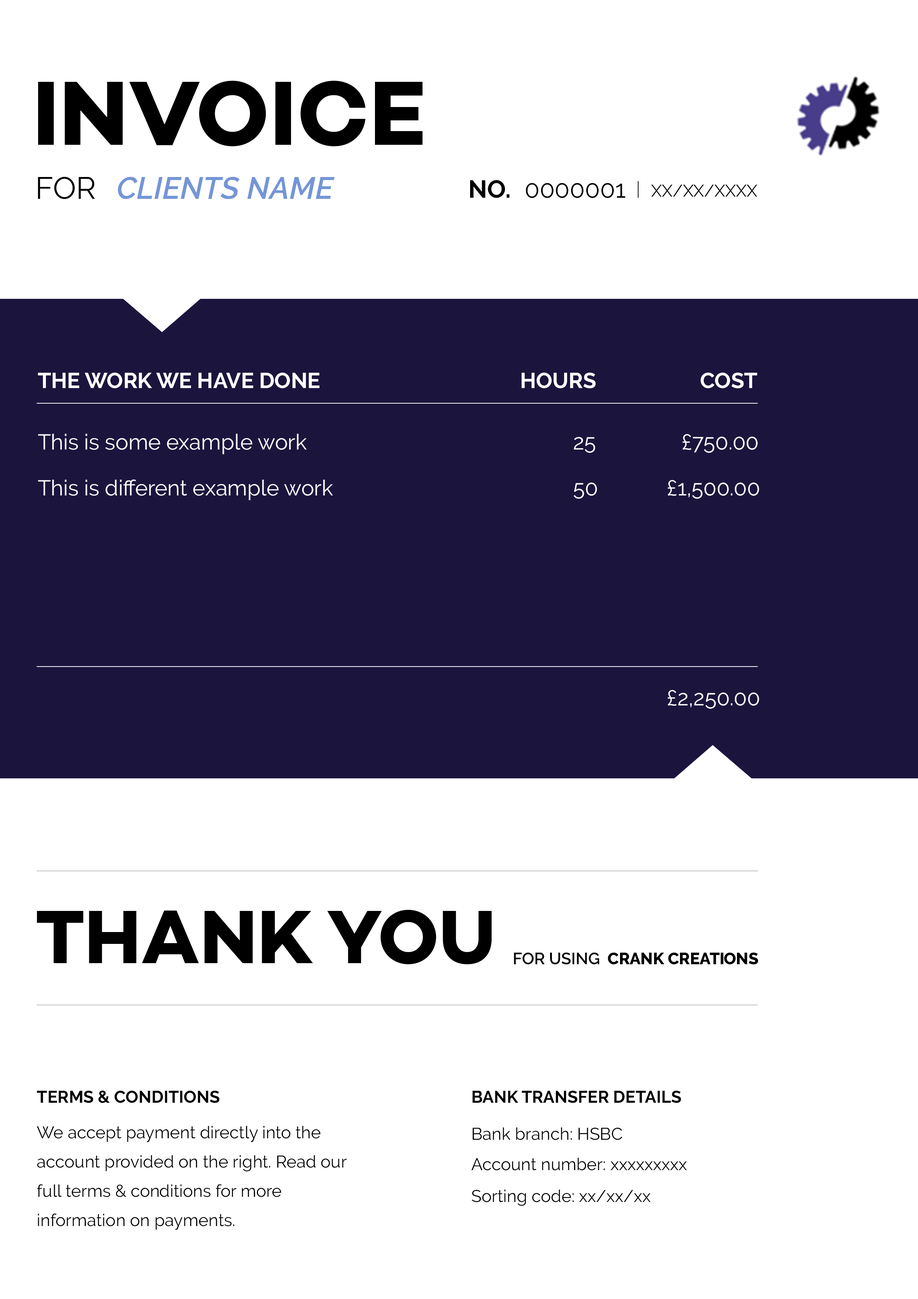
<style>
.page{position:relative;width:918px;height:1299px;background:#ffffff}
.page>*{position:absolute;margin:0}
.t1{font:92.6px "Campton-BoldDEMO";color:#000000}
.t2{font:30.9px "Raleway-Regular";color:#000000}
.t3{font:30.9px "Raleway-SemiBoldItalic";color:#7495d7}
.t4{font:24.7px "Raleway-Bold";color:#000000}
.t5{font:24.7px "Raleway-Regular";color:#000000}
.t6{font:17px "Raleway-Regular";color:#000000}
.t7{font:21.6px "Raleway-Bold";color:#ffffff}
.t8{font:21.6px "Raleway-Regular";color:#ffffff}
.t9{font:77.1px "Campton-BoldDEMO";color:#000000}
.t10{font:16.4px "Raleway-ExtraBold";color:#000000}
.t11{font:16.4px "Raleway-SemiBold";color:#000000}
.t12{font:17px "Raleway-Bold";color:#000000}
.t13{font:17px/29.3px "Raleway-Regular";color:#000000}
</style>
<div class="page">
<p class="t1" style="left:38px;top:81px;width:385px;height:65px">INVOICE</p>
<p class="t2" style="left:38px;top:177px;width:57px;height:22px">FOR</p>
<p class="t3" style="left:118px;top:177px;width:217px;height:22px">CLIENTS NAME</p>
<p class="t4" style="left:470px;top:180px;width:40px;height:18px">NO.</p>
<p class="t5" style="left:526px;top:183px;width:99px;height:15px">0000001</p>
<p class="t6" style="left:651px;top:184px;width:106px;height:13px">XX/XX/XXXX</p>
<p class="t7" style="left:38px;top:372px;width:282px;height:16px">THE WORK WE HAVE DONE</p>
<p class="t7" style="left:522px;top:372px;width:74px;height:16px">HOURS</p>
<p class="t7" style="left:700px;top:372px;width:57px;height:16px">COST</p>
<p class="t8" style="left:38px;top:434px;width:269px;height:20px">This is some example work</p>
<p class="t8" style="left:574px;top:437px;width:21px;height:16px">25</p>
<p class="t8" style="left:683px;top:434px;width:75px;height:19px">£750.00</p>
<p class="t8" style="left:38px;top:479px;width:295px;height:21px">This is different example work</p>
<p class="t8" style="left:574px;top:482px;width:23px;height:17px">50</p>
<p class="t8" style="left:668px;top:480px;width:91px;height:19px">£1,500.00</p>
<p class="t8" style="left:668px;top:690px;width:91px;height:19px">£2,250.00</p>
<p class="t9" style="left:37px;top:910px;width:455px;height:54px">THANK YOU</p>
<p class="t10" style="left:514px;top:952px;width:244px;height:12px"><span class="t11">FOR USING</span>  CRANK CREATIONS</p>
<p class="t12" style="left:37px;top:1090px;width:183px;height:13px">TERMS &amp; CONDITIONS</p>
<p class="t12" style="left:472px;top:1090px;width:209px;height:13px">BANK TRANSFER DETAILS</p>
<p class="t13" style="left:37px;top:1125px;width:310px;height:105px">We accept payment directly into the <br>account provided on the right. Read our<br>full terms &amp; conditions for more <br>information on payments.</p>
<p class="t6" style="left:473px;top:1127px;width:149px;height:13px">Bank branch: HSBC</p>
<p class="t6" style="left:471px;top:1157px;width:216px;height:13px">Account number: xxxxxxxxx</p>
<p class="t6" style="left:472px;top:1189px;width:179px;height:17px">Sorting code: xx/xx/xx</p>
</div>
